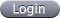
<style>
.page{position:relative;width:60px;height:18px}
.page>*{position:absolute;margin:0}
.t1{font:13px "LucidaGrande";letter-spacing:-0.025em;color:#ffffff}
</style>
<div class="page">
<p class="t1" style="left:13px;top:3px;width:32px;height:13px">Login</p>
</div>
